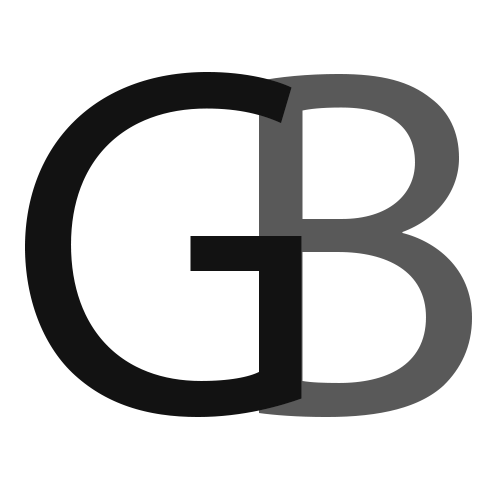
<style>
.page{position:relative;width:500px;height:500px;background:#ffffff}
.page>*{position:absolute;margin:0}
.t1{font:500px "MyriadPro-Regular";color:#121212}
.t2{font:500px "MyriadPro-Regular";color:#595959}
</style>
<div class="page">
<p class="t1" style="left:25px;top:72px;width:277px;height:345px">G</p>
<p class="t2" style="left:259px;top:74px;width:213px;height:343px">B</p>
</div>
